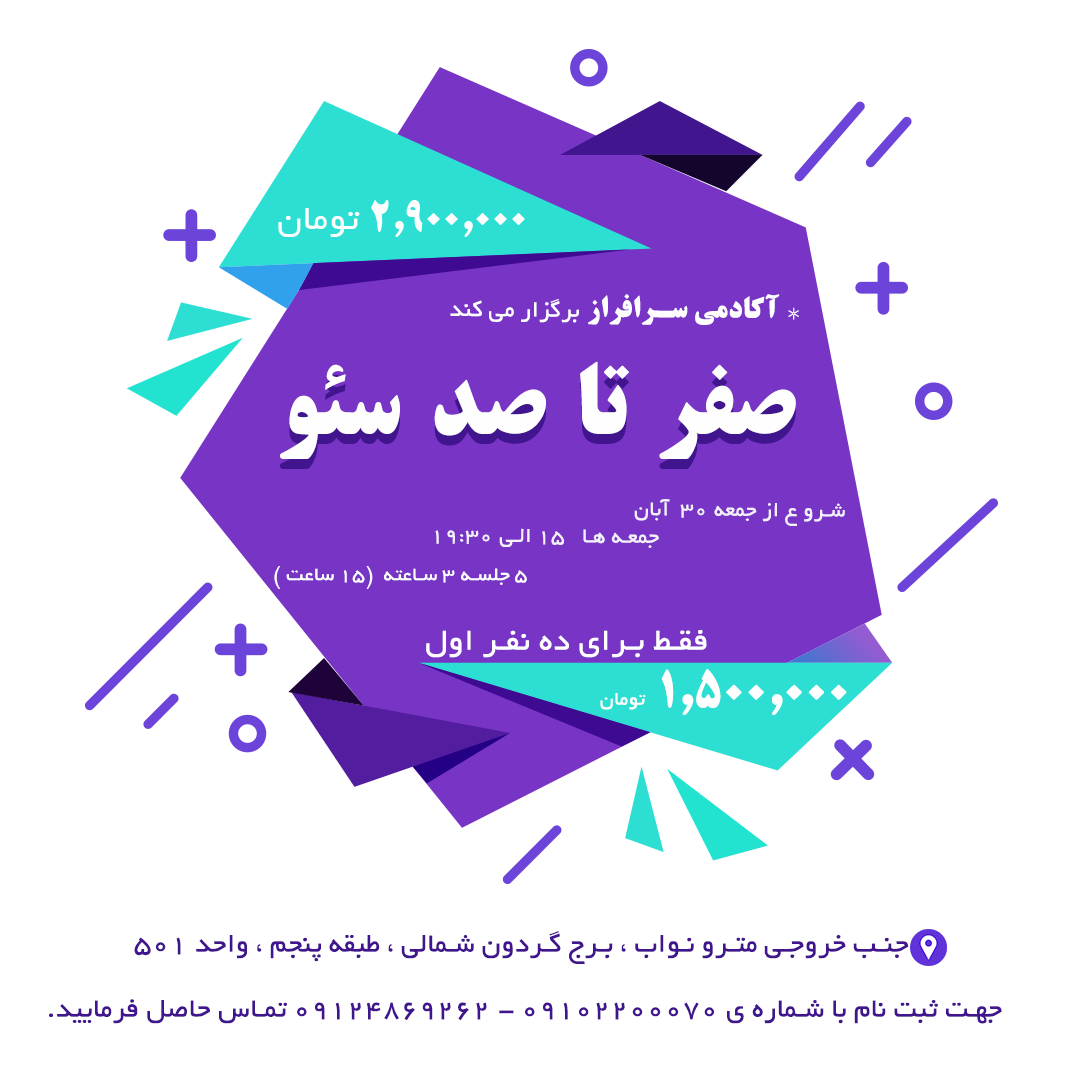
<style>
.page{position:relative;width:1080px;height:1080px;background:#ffffff}
.page>*{position:absolute;margin:0}
.t1{font:37.5px "2--TitrBold";letter-spacing:0.025em;color:#fdfdfd}
.t2{font:37.5px "BYekan";letter-spacing:0.025em;color:#fdfdfd}
.t3{font:23px "BYekan";letter-spacing:0.025em;color:#f3f0f9}
.t4{font:29.2px "BYekan";letter-spacing:0.025em;color:#fefefe}
.t5{font:37.6px "BYekan";letter-spacing:0.025em;color:#fefefe}
.t6{font:29.2px "2--TitrBold";letter-spacing:0.025em;color:#fefefe}
.t7{font:25.1px "BYekan";letter-spacing:0.025em;color:#fefefe}
.t8{font:98.2px "2--TitrBold";letter-spacing:0.025em;color:#fefefe}
.t9{font:20.8px "BYekan";letter-spacing:0.025em;color:#fefefe;scale:1.03 1}
.t10{font:25px "BYekan";letter-spacing:0.025em;color:#fefefe;scale:1.03 1}
.t11{font:33.3px "BYekan";letter-spacing:0.025em;color:#fefefe;scale:1.03 1}
.t12{font:45.8px "2--TitrBold";letter-spacing:0.025em;color:#fefefe;scale:1.03 1}
.t13{font:29.2px "BYekan";letter-spacing:0.025em;color:#40158e}
</style>
<div class="page">
<p class="t1" style="left:278px;top:200px;width:247px;height:37px">2,900,000<span class="t2"> تومان</span></p>
<p class="t3" style="left:435px;top:294px;width:410px;height:254px"><span class="t4"><br>     </span><span class="t5">   * </span><span class="t6">آکادمی سرافراز </span><span class="t7">برگزار می کند<br><br><br><br><br><br></span>  شرو ع از جمعه 30  آبان  <br>                                    جمعه ها   15 الی 19:30</p>
<p class="t8" style="left:280px;top:361px;width:516px;height:98px">صفر تا صد سئو</p>
<p class="t9" style="left:274px;top:566px;width:253px;height:23px"><span class="t10"> </span>5 جلسه 3 ساعته  (15 ساعت )</p>
<p class="t11" style="left:426px;top:630px;width:421px;height:85px">فقط برای ده نفر اول<br> <span class="t12">1,500,000 </span><span class="t9">تومان</span></p>
<p class="t13" style="left:49px;top:931px;width:953px;height:93px">جنب خروجی مترو نواب ، برج گردون شمالی ، طبقه پنجم ، واحد 501<br><br>جهت ثبت نام با شماره ی 09102200070 - 09124869262 تماس حاصل فرمایید.</p>
</div>
